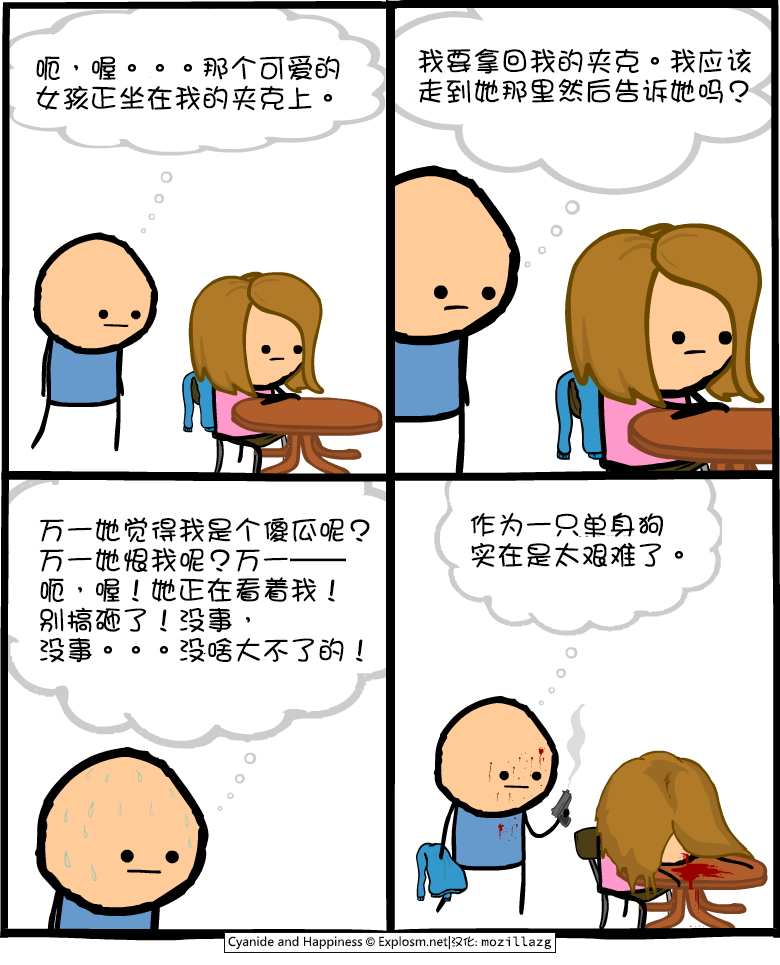
<style>
.page{position:relative;width:780px;height:965px;background:#ffffff}
.page>*{position:absolute;margin:0}
.t1{font:28px/30px "DFGirl";color:#000000}
</style>
<div class="page">
<p class="t1" style="left:418px;top:48px;width:334px;height:56px">我要拿回我的夹克。我应该<br>走到她那里然后告诉她吗？</p>
<p class="t1" style="left:36px;top:55px;width:304px;height:56px">呃，喔。。。那个可爱的<br>女孩正坐在我的夹克上。</p>
<p class="t1" style="left:39px;top:517px;width:331px;height:146px">万一她觉得我是个傻瓜呢？<br>万一她恨我呢？万一——<br>呃，喔！她正在看着我！<br>别搞砸了！没事，<br>没事。。。没啥大不了的！</p>
<p class="t1" style="left:470px;top:512px;width:213px;height:56px">作为一只单身狗<br>实在是太艰难了。</p>
</div>
